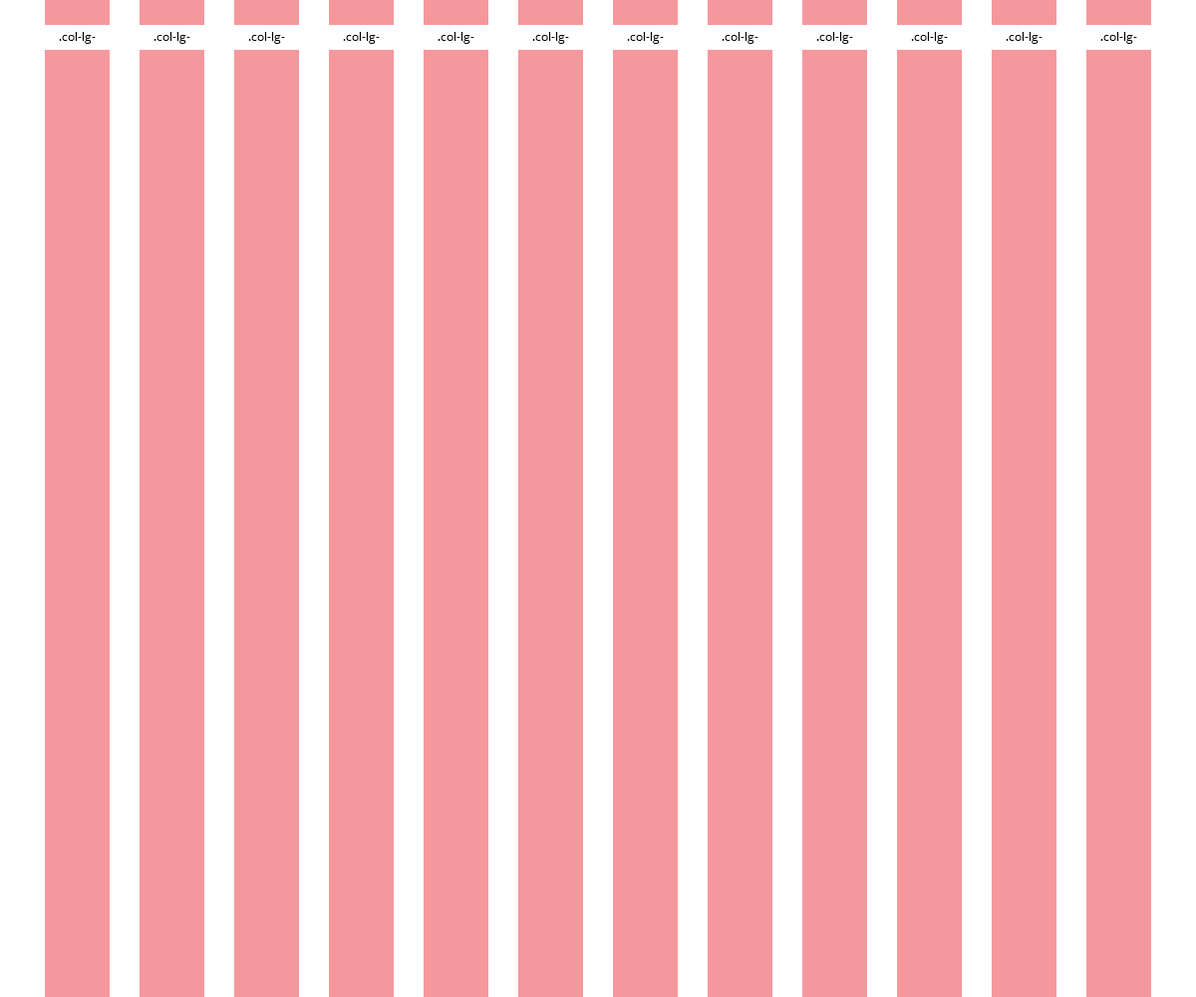
<style>
.page{position:relative;width:1196px;height:997px;background:#f5989d}
.page>*{position:absolute;margin:0}
.t1{font:12px "OpenSans";color:#000000}
</style>
<div class="page">
<p class="t1" style="left:59px;top:32px;width:37px;height:12px">.col-lg-</p>
<p class="t1" style="left:154px;top:32px;width:36px;height:12px">.col-lg-</p>
<p class="t1" style="left:248px;top:32px;width:37px;height:12px">.col-lg-</p>
<p class="t1" style="left:343px;top:32px;width:37px;height:12px">.col-lg-</p>
<p class="t1" style="left:438px;top:32px;width:36px;height:12px">.col-lg-</p>
<p class="t1" style="left:532px;top:32px;width:37px;height:12px">.col-lg-</p>
<p class="t1" style="left:627px;top:32px;width:37px;height:12px">.col-lg-</p>
<p class="t1" style="left:722px;top:32px;width:37px;height:12px">.col-lg-</p>
<p class="t1" style="left:816px;top:32px;width:37px;height:12px">.col-lg-</p>
<p class="t1" style="left:911px;top:32px;width:37px;height:12px">.col-lg-</p>
<p class="t1" style="left:1006px;top:32px;width:37px;height:12px">.col-lg-</p>
<p class="t1" style="left:1101px;top:32px;width:36px;height:12px">.col-lg-</p>
</div>
